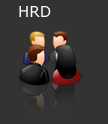
<style>
.page{position:relative;width:108px;height:124px;background:#333333}
.page>*{position:absolute;margin:0}
.t1{font:15px "Verdana";color:#ffffff}
</style>
<div class="page">
<p class="t1" style="left:19px;top:6px;width:32px;height:11px">HRD</p>
</div>
